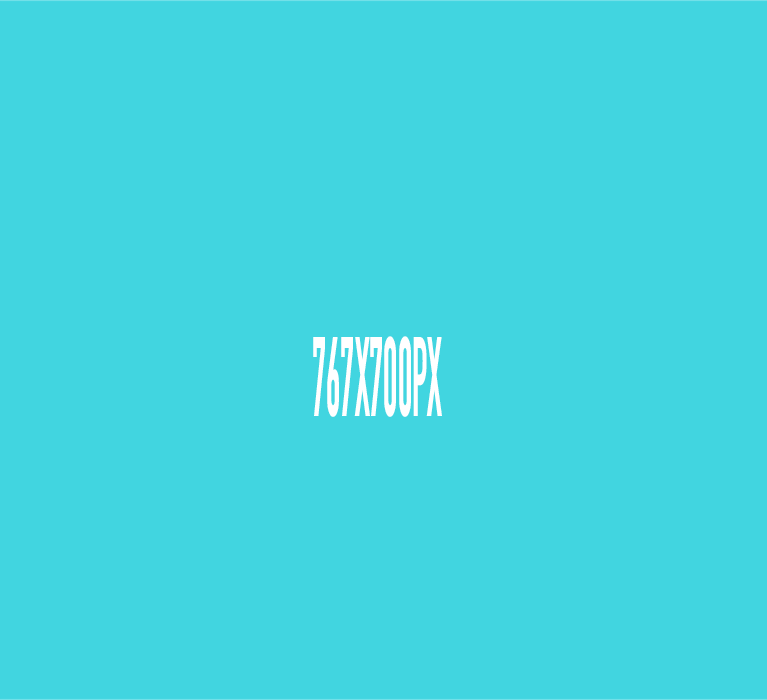
<style>
.page{position:relative;width:767px;height:700px;background:#41d5e0}
.page>*{position:absolute;margin:0}
.t1{font:110.8px "DINCondensed-Bold";color:#ffffff;text-transform:uppercase;scale:0.34 1}
</style>
<div class="page">
<p class="t1" style="left:313px;top:336px;width:129px;height:81px">767X700PX</p>
</div>
